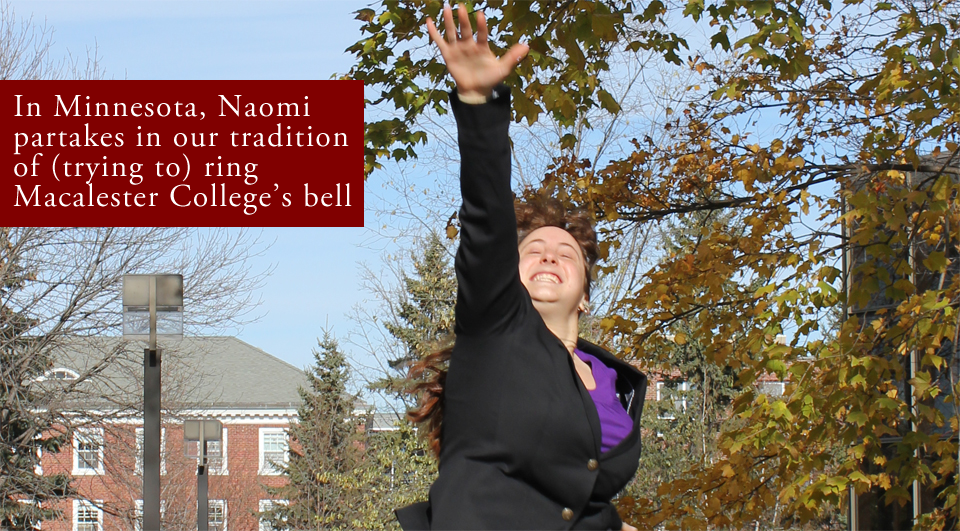
<style>
.page{position:relative;width:960px;height:531px}
.page>*{position:absolute;margin:0}
.t1{font:32px/30px "AGaramondPro-Regular";letter-spacing:0.046em;color:#ffffff}
</style>
<div class="page">
<p class="t1" style="left:13px;top:95px;width:339px;height:120px">In Minnesota, Naomi <br>partakes in our tradition <br>of (trying to) ring<br>Macalester College’s bell</p>
</div>
